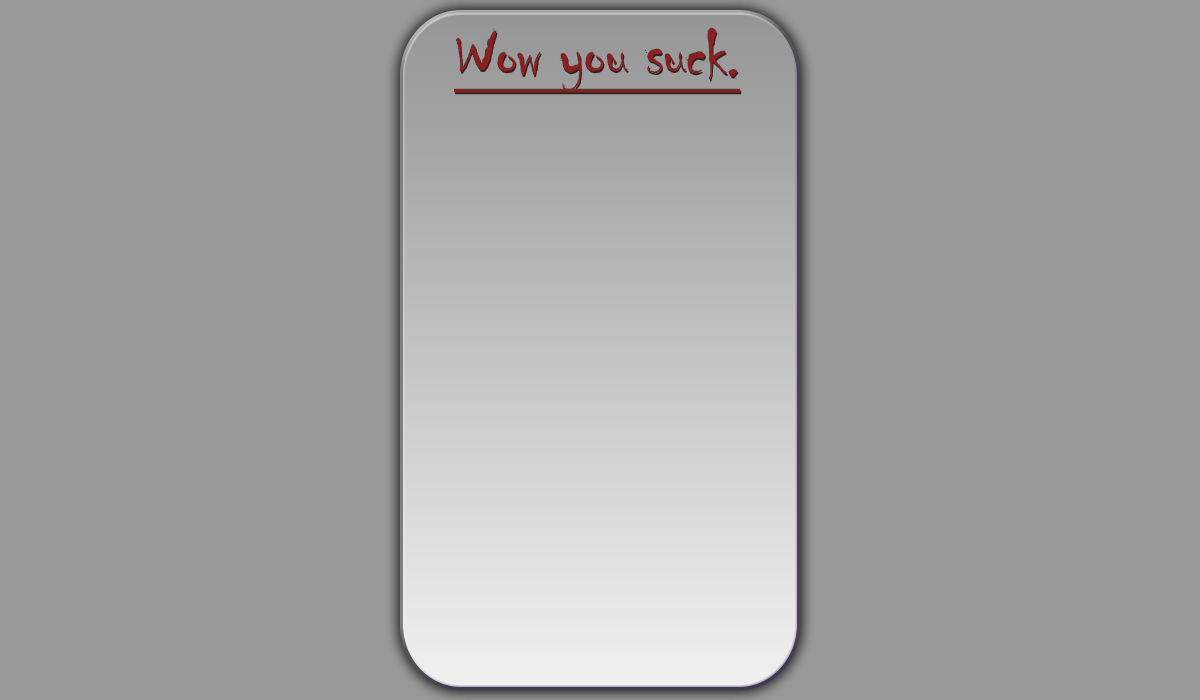
<style>
.page{position:relative;width:1200px;height:700px;background:#999999}
.page>*{position:absolute;margin:0}
.t1{font:71.8px "Chiller-Regular";letter-spacing:-0.025em;color:#892122;text-decoration:underline}
</style>
<div class="page">
<p class="t1" style="left:454px;top:27px;width:287px;height:66px">Wow you suck.</p>
</div>
